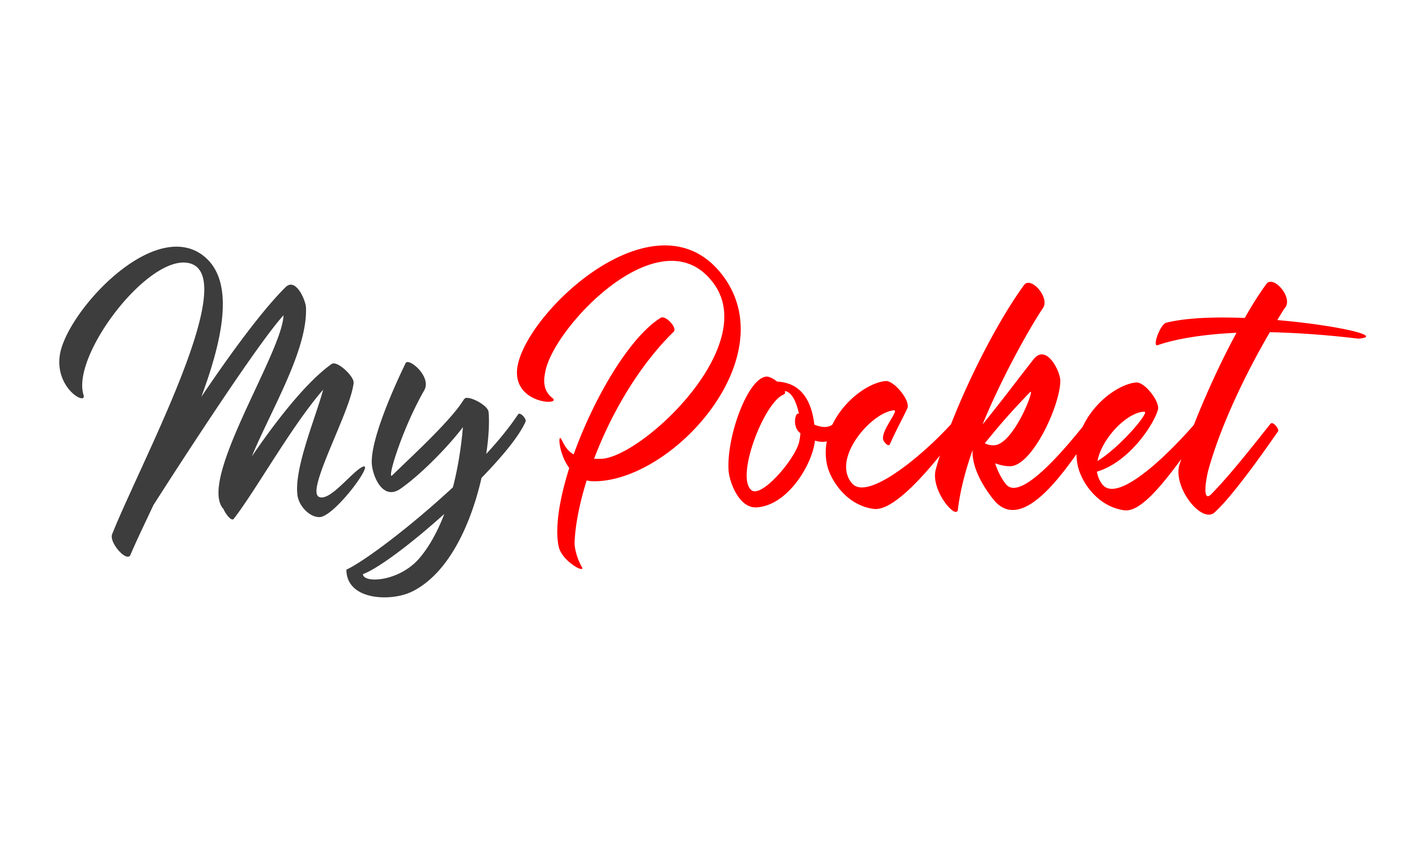
<style>
.page{position:relative;width:1410px;height:846px;background:#ffffff}
.page>*{position:absolute;margin:0}
.t1{font:295px "DebtosScriptFreeVersion";color:#ff0000}
.t2{font:295.1px "DebtosScriptFreeVersion";color:#3d3d3d}
</style>
<div class="page">
<p class="t1" style="left:516px;top:245px;width:850px;height:324px">Pocket</p>
<p class="t2" style="left:59px;top:246px;width:467px;height:351px">My</p>
</div>
